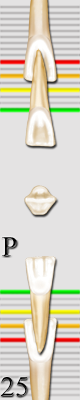
<style>
.page{position:relative;width:80px;height:400px;background:#e4e3e3}
.page>*{position:absolute;margin:0}
.t1{font:28.4px "TimesNewRomanPSMT";letter-spacing:0.005em;color:#000000}
</style>
<div class="page">
<p class="t1" style="left:2px;top:237px;width:15px;height:19px">P</p>
<p class="t1" style="left:1px;top:377px;width:27px;height:20px">25</p>
</div>
